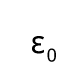
<style>
.page{position:relative;width:80px;height:80px;background:#ffffff}
.page>*{position:absolute;margin:0}
.t1{font:31.8px "DroidSans";color:#000000}
.t2{font:18px "DroidSans";color:#000000}
</style>
<div class="page">
<p class="t1" style="left:32px;top:36px;width:12px;height:18px">ε</p>
<p class="t2" style="left:47px;top:48px;width:9px;height:14px">0</p>
</div>
